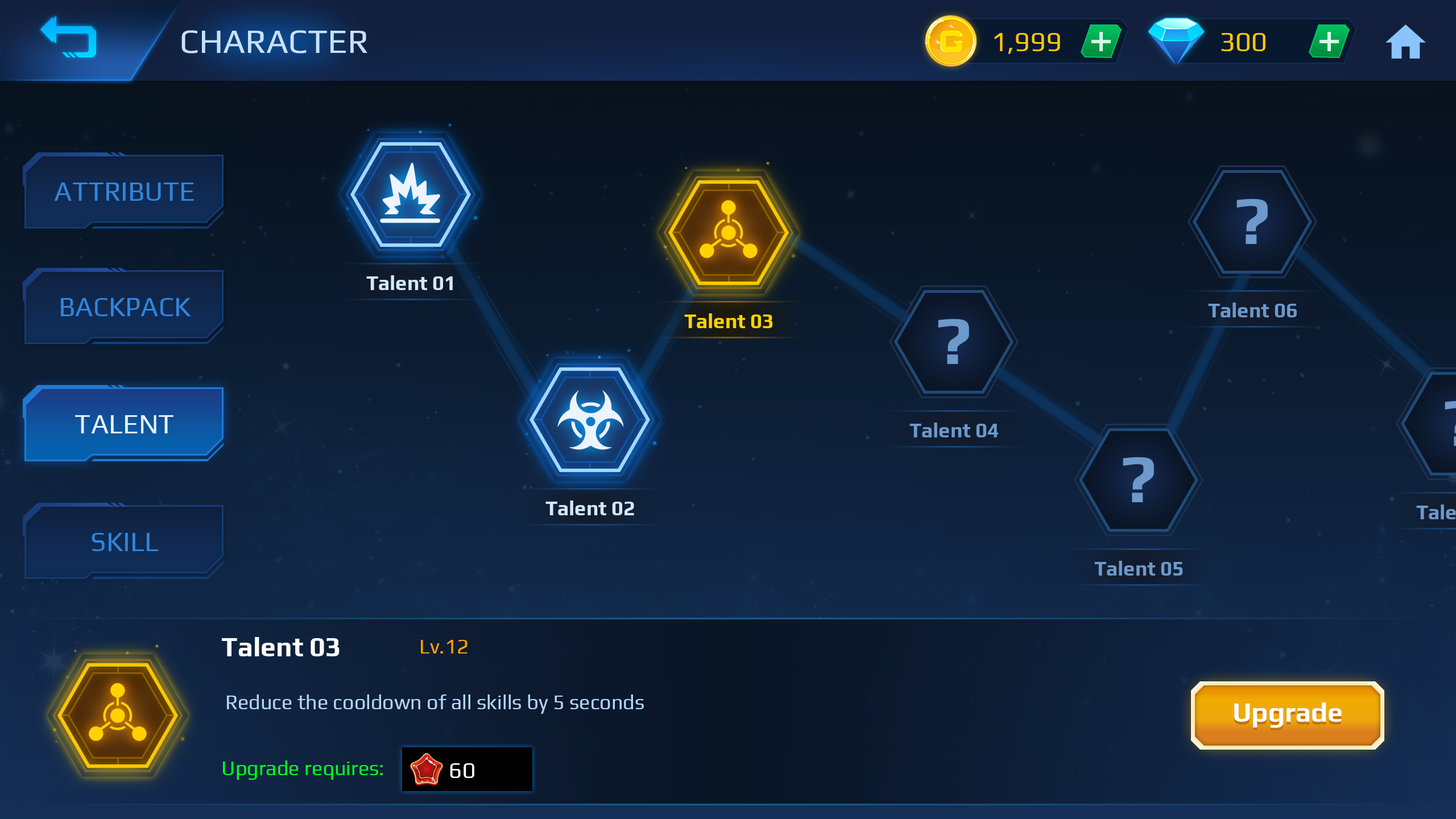
<style>
.page{position:relative;width:1456px;height:819px}
.page>*{position:absolute;margin:0}
.t1{font:34.1px "Play-Regular";color:#c6e1fc}
.t2{font:27.3px "Play-Regular";color:#ffc600}
.t3{font:27.3px "Play-Regular";color:#3085dc}
.t4{font:68.2px "Play-Bold";color:#6d99cb}
.t5{font:20.5px "Play-Bold";color:#d3e8f9}
.t6{font:20.5px "Play-Bold";color:#6d99cb}
.t7{font:20.5px "Play-Bold";color:#ffd200}
.t8{font:27.3px "Play-Regular";color:#e3f1ff}
.t9{font:27.3px "Play-Bold";color:#ffffff}
.t10{font:20.5px "Play-Regular";color:#ffa200}
.t11{font:20.5px "Play-Regular";color:#b3d5f8}
.t12{font:20.5px "Play-Regular";color:#00fd1e}
.t13{font:22.7px "Play-Regular";color:#ffffff}
</style>
<div class="page">
<p class="t1" style="left:181px;top:30px;width:186px;height:23px">CHARACTER</p>
<p class="t2" style="left:994px;top:33px;width:66px;height:21px">1,999</p>
<p class="t2" style="left:1221px;top:33px;width:44px;height:18px">300</p>
<p class="t3" style="left:54px;top:183px;width:140px;height:18px">ATTRIBUTE</p>
<p class="t4" style="left:1236px;top:198px;width:32px;height:46px">?</p>
<p class="t5" style="left:366px;top:275px;width:87px;height:15px">Talent 01</p>
<p class="t3" style="left:61px;top:298px;width:130px;height:18px">BACKPACK</p>
<p class="t6" style="left:1208px;top:303px;width:89px;height:14px">Talent 06</p>
<p class="t7" style="left:684px;top:313px;width:89px;height:15px">Talent 03</p>
<p class="t4" style="left:938px;top:318px;width:31px;height:46px">?</p>
<p class="t8" style="left:75px;top:415px;width:98px;height:18px">TALENT</p>
<p class="t6" style="left:909px;top:423px;width:89px;height:14px">Talent 04</p>
<p class="t4" style="left:1123px;top:457px;width:31px;height:45px">?</p>
<p class="t3" style="left:92px;top:533px;width:66px;height:18px">SKILL</p>
<p class="t6" style="left:1094px;top:561px;width:89px;height:15px">Talent 05</p>
<p class="t9" style="left:222px;top:637px;width:118px;height:19px">Talent 03</p>
<p class="t10" style="left:421px;top:640px;width:47px;height:13px">Lv.12</p>
<p class="t11" style="left:227px;top:694px;width:417px;height:20px">Reduce the cooldown of all skills by 5 seconds</p>
<p class="t9" style="left:1234px;top:702px;width:108px;height:26px">Upgrade</p>
<p class="t12" style="left:223px;top:760px;width:160px;height:20px">Upgrade requires:</p>
<p class="t13" style="left:450px;top:763px;width:24px;height:15px">60</p>
</div>
